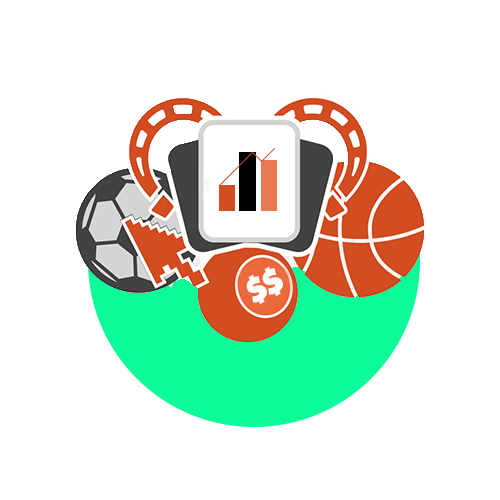
<style>
.page{position:relative;width:500px;height:500px;background:#ffffff}
.page>*{position:absolute;margin:0}
.t1{font:28.3px "GROBOLD";color:#fffcfb}
</style>
<div class="page">
<p class="t1" style="left:262px;top:266px;width:21px;height:31px;rotate:-27deg">$</p>
<p class="t1" style="left:246px;top:274px;width:21px;height:31px;rotate:-27deg">$</p>
</div>
